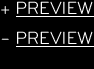
<style>
.page{position:relative;width:94px;height:69px;background:#000000}
.page>*{position:absolute;margin:0}
.t1{font:18px "Bryant-RegularAlt";color:#ffffff;text-transform:uppercase}
.t2{font:18px "Bryant-RegularAlt";text-transform:uppercase;scale:1.6 1}
</style>
<div class="page">
<p class="t1" style="left:1px;top:1px;width:92px;height:13px">+ PREVIEW</p>
<p class="t1" style="left:1px;top:31px;width:92px;height:13px">+ PREVIEW</p>
<p class="t2" style="left:1px;top:38px;width:8px;height:2px">-</p>
</div>
